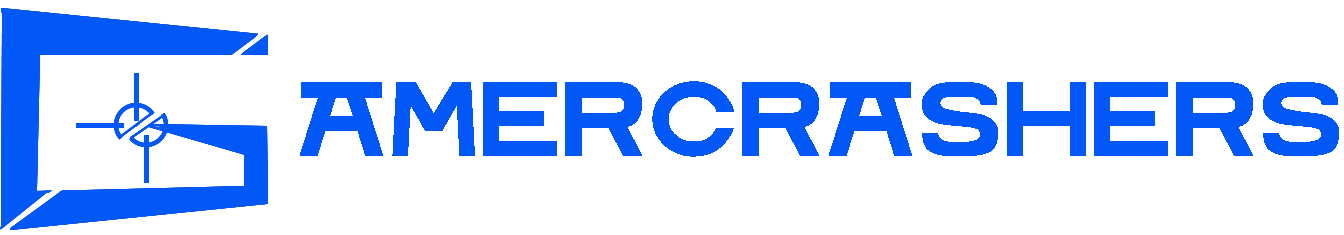
<style>
.page{position:relative;width:1344px;height:235px;background:#ffffff}
.page>*{position:absolute;margin:0}
.t1{font:100px "MoshimojiP";color:#0158f7}
</style>
<div class="page">
<p class="t1" style="left:300px;top:81px;width:1039px;height:76px">AMERCRASHERS</p>
</div>
